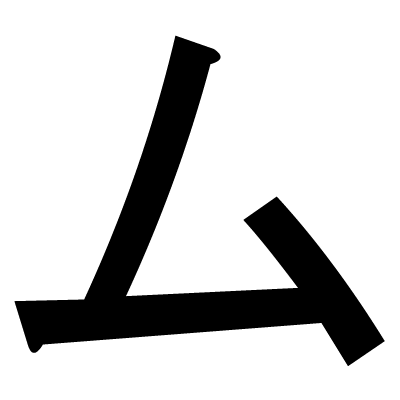
<style>
.page{position:relative;width:400px;height:400px;background:#ffffff}
.page>*{position:absolute;margin:0}
.t1{font:424.8px "MS-PGothic";color:#000000}
</style>
<div class="page">
<p class="t1" style="left:14px;top:35px;width:371px;height:331px">ム</p>
</div>
